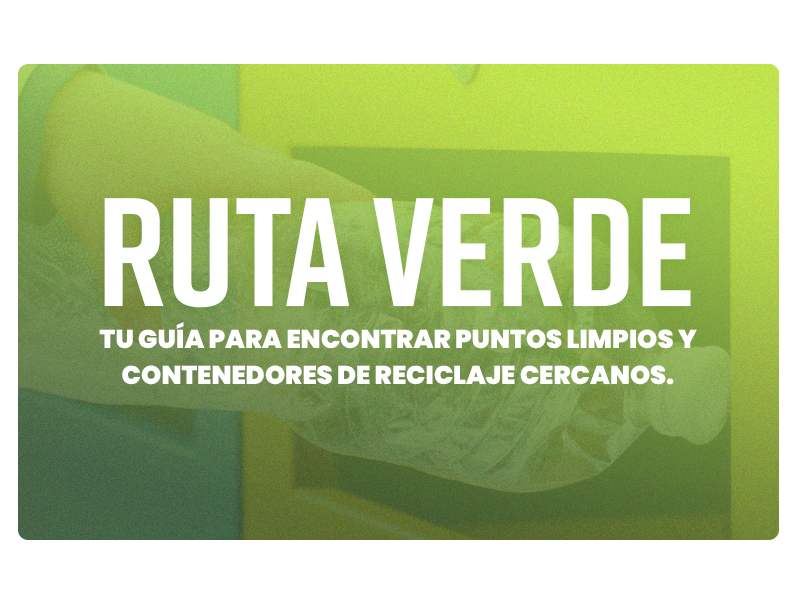
<style>
.page{position:relative;width:800px;height:600px;background:#ffffff}
.page>*{position:absolute;margin:0}
.t1{font:154.3px "Rift-Bold";color:#ffffff;text-transform:uppercase}
.t2{font:25.7px/36px "Poppins-Black";color:#ffffff;text-transform:uppercase}
</style>
<div class="page">
<p class="t1" style="left:104px;top:198px;width:587px;height:110px">RUTA VERDE</p>
<p class="t2" style="left:99px;top:322px;width:598px;height:63px;text-align:center">Tu guía para encontrar puntos limpios y contenedores de reciclaje cercanos.</p>
</div>
